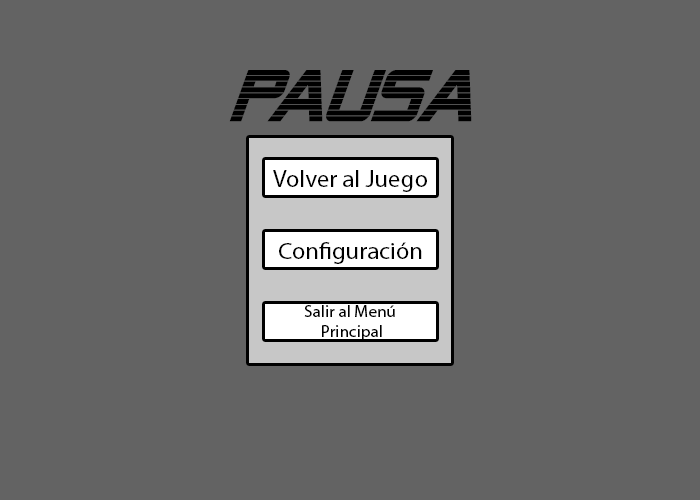
<style>
.page{position:relative;width:700px;height:500px;background:#636363}
.page>*{position:absolute;margin:0}
.t1{font:72.4px "AlienEncountersBoldItalic";color:#000000}
.t2{font:24px "MyriadPro-Regular";color:#000000}
.t3{font:23.8px "MyriadPro-Regular";color:#000000;scale:1.04 1}
.t4{font:16.6px "MyriadPro-Regular";color:#000000;scale:1.04 1}
</style>
<div class="page">
<p class="t1" style="left:229px;top:70px;width:243px;height:52px">PAUSA</p>
<p class="t2" style="left:273px;top:170px;width:154px;height:22px">Volver al Juego</p>
<p class="t3" style="left:279px;top:242px;width:143px;height:22px">Configuración</p>
<p class="t4" style="left:304px;top:305px;width:91px;height:35px;text-align:center">Salir al Menú<br> Principal</p>
</div>
